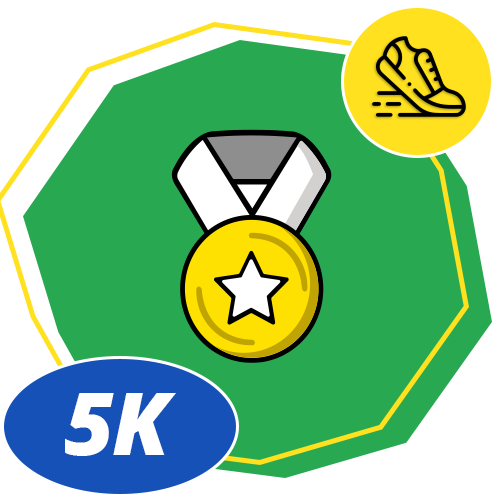
<style>
.page{position:relative;width:500px;height:500px;background:#28a951}
.page>*{position:absolute;margin:0}
.t1{font:86.2px "AvrileSansUI-BlackItalic";letter-spacing:-0.02em;color:#ffffff;text-transform:uppercase}
</style>
<div class="page">
<p class="t1" style="left:65px;top:393px;width:111px;height:63px">5k</p>
</div>
